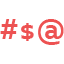
<style>
.page{position:relative;width:64px;height:64px;background:#ffffff}
.page>*{position:absolute;margin:0}
.t1{font:30.3px "Corbel-Bold";color:#ed5252}
</style>
<div class="page">
<p class="t1" style="left:0px;top:19px;width:64px;height:26px">#$@</p>
</div>
